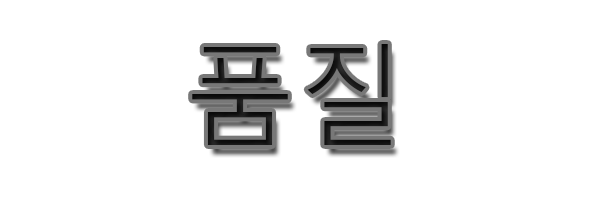
<style>
.page{position:relative;width:600px;height:200px;background:#ffffff}
.page>*{position:absolute;margin:0}
.t1{font:110px "MalgunGothic-Semilight";color:#121212}
</style>
<div class="page">
<p class="t1" style="left:192px;top:44px;width:199px;height:101px">품질</p>
</div>
